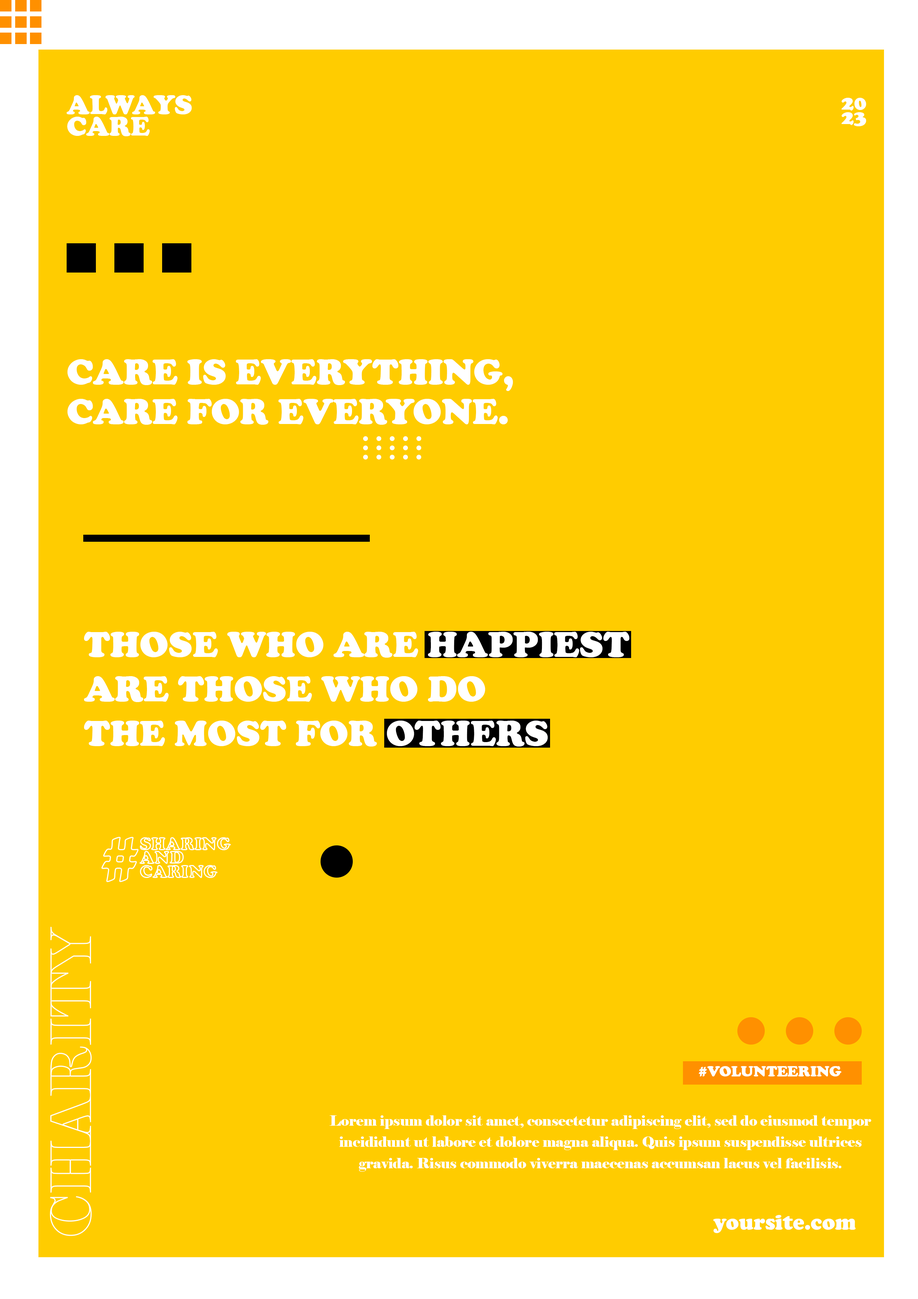
<style>
.page{position:relative;width:918px;height:1299px;background:#ffcc00}
.page>*{position:absolute;margin:0}
.t1{font:27.8px/21.3px "CooperBlack";color:#ffffff}
.t2{font:21.3px/14.2px "CooperBlack";color:#ffffff}
.t3{font:37px "CooperBlack";color:#ffffff}
.t4{font:72px "CooperBlack";color:#ffcc00}
.t5{font:18px/13.8px "CooperBlack"}
.t6{font:55.5px "Elephant-Regular";color:#ffcc00}
.t7{font:15.4px "CooperBlack";color:#ffffff}
.t8{font:13.9px/21.3px "Elephant-Regular";color:#ffffff}
.t9{font:21.6px "CooperBlack";color:#ffffff}
</style>
<div class="page">
<p class="t1" style="left:67px;top:95px;width:125px;height:41px">ALWAYS<br>CARE</p>
<p class="t2" style="left:842px;top:98px;width:24px;height:28px;text-align:center">20<br>23</p>
<p class="t3" style="left:67px;top:359px;width:446px;height:32px">CARE IS EVERYTHING,</p>
<p class="t3" style="left:67px;top:399px;width:441px;height:26px">CARE FOR EVERYONE.</p>
<p class="t3" style="left:84px;top:632px;width:546px;height:114px">THOSE WHO ARE HAPPIEST<br>ARE THOSE WHO DO<br>THE MOST FOR OTHERS</p>
<p class="t4" style="left:101px;top:837px;width:38px;height:45px">#</p>
<p class="t5" style="left:140px;top:837px;width:91px;height:41px">SHARING<br>AND<br>CARING</p>
<p class="t6" style="left:50px;top:927px;width:42px;height:309px;rotate:-90deg">CHARITY</p>
<p class="t7" style="left:699px;top:1066px;width:143px;height:10px">#VOLUNTEERING</p>
<p class="t8" style="left:329px;top:1115px;width:543px;height:56px;text-align:center">Lorem ipsum dolor sit amet, consectetur adipiscing elit, sed do eiusmod tempor incididunt ut labore et dolore magna aliqua. Quis ipsum suspendisse ultrices gravida. Risus commodo viverra maecenas accumsan lacus vel facilisis.</p>
<p class="t9" style="left:713px;top:1215px;width:143px;height:18px">yoursite.com</p>
</div>
